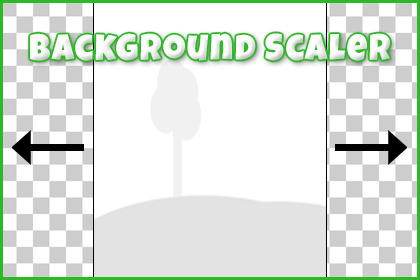
<style>
.page{position:relative;width:420px;height:280px;background:#ffffff}
.page>*{position:absolute;margin:0}
.t1{font:36.8px "LuckiestGuy-Regular";letter-spacing:0.05em;color:#ffffff;scale:0.95 1}
</style>
<div class="page">
<p class="t1" style="left:30px;top:33px;width:360px;height:28px">Background Scaler</p>
</div>
